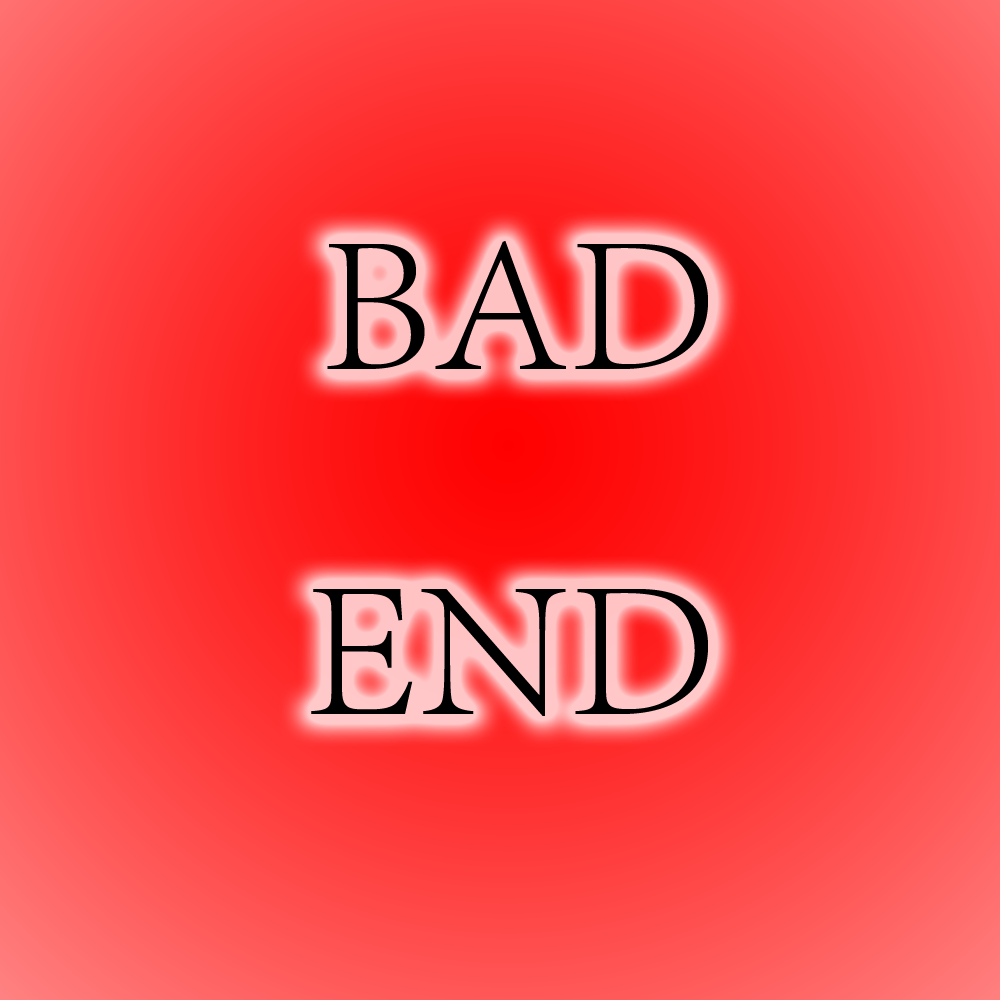
<style>
.page{position:relative;width:1000px;height:1000px}
.page>*{position:absolute;margin:0}
.t1{font:200px "AdobeSongStd-Light";color:#000000}
</style>
<div class="page">
<p class="t1" style="left:327px;top:241px;width:381px;height:128px">BAD</p>
<p class="t1" style="left:311px;top:589px;width:397px;height:127px">END</p>
</div>
